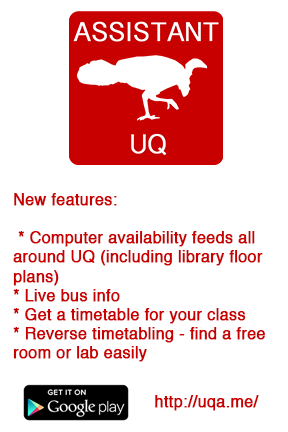
<style>
.page{position:relative;width:288px;height:432px;background:#ffffff}
.page>*{position:absolute;margin:0}
.t1{font:16px "Helvetica";color:#c90000;font-weight:bold}
</style>
<div class="page">
<p class="t1" style="left:13px;top:193px;width:252px;height:169px">New features:<br><br> * Computer availability feeds all around UQ (including library floor plans)<br>* Live bus info<br>* Get a timetable for your class<br>* Reverse timetabling - find a free room or lab easily</p>
<p class="t1" style="left:155px;top:395px;width:104px;height:16px">http://uqa.me/</p>
</div>
